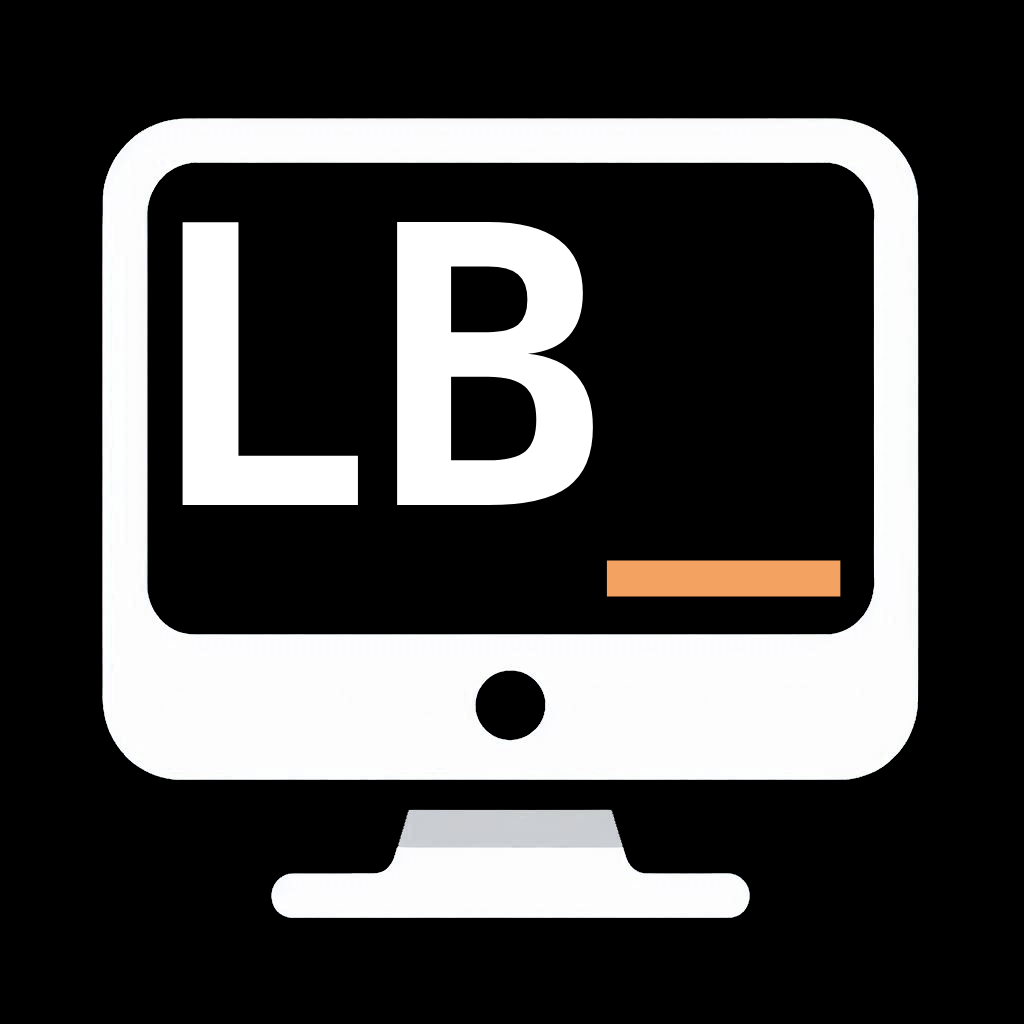
<style>
.page{position:relative;width:1024px;height:1024px;background:#000000}
.page>*{position:absolute;margin:0}
.t1{font:387.8px "DejaVuSansMono-Bold";color:#ffffff}
.t2{font:387.8px "DejaVuSansMono-Bold";color:#f4a261}
</style>
<div class="page">
<p class="t1" style="left:182px;top:221px;width:659px;height:376px">LB<span class="t2">_</span></p>
</div>
